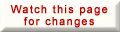
<style>
.page{position:relative;width:120px;height:32px;background:#fefdf5}
.page>*{position:absolute;margin:0}
.t1{font:11px "ArialMT";letter-spacing:0.1em;color:#c00000;font-weight:bold}
</style>
<div class="page">
<p class="t1" style="left:10px;top:5px;width:98px;height:23px;text-align:center">Watch this page<br>for changes</p>
</div>
